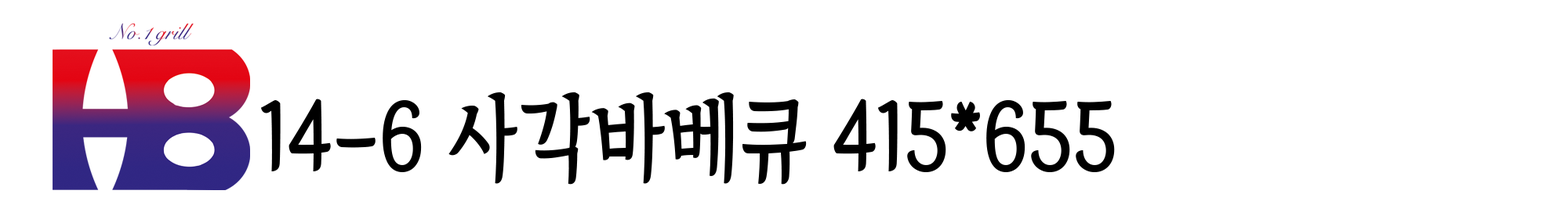
<style>
.page{position:relative;width:1568px;height:205px;background:#ffffff}
.page>*{position:absolute;margin:0}
.t1{font:93.7px "TheIndependenceHallofKorea-Regular";color:#000000;scale:0.89 1}
</style>
<div class="page">
<p class="t1" style="left:261px;top:93px;width:854px;height:92px">14-6 사각바베큐 415*655</p>
</div>
